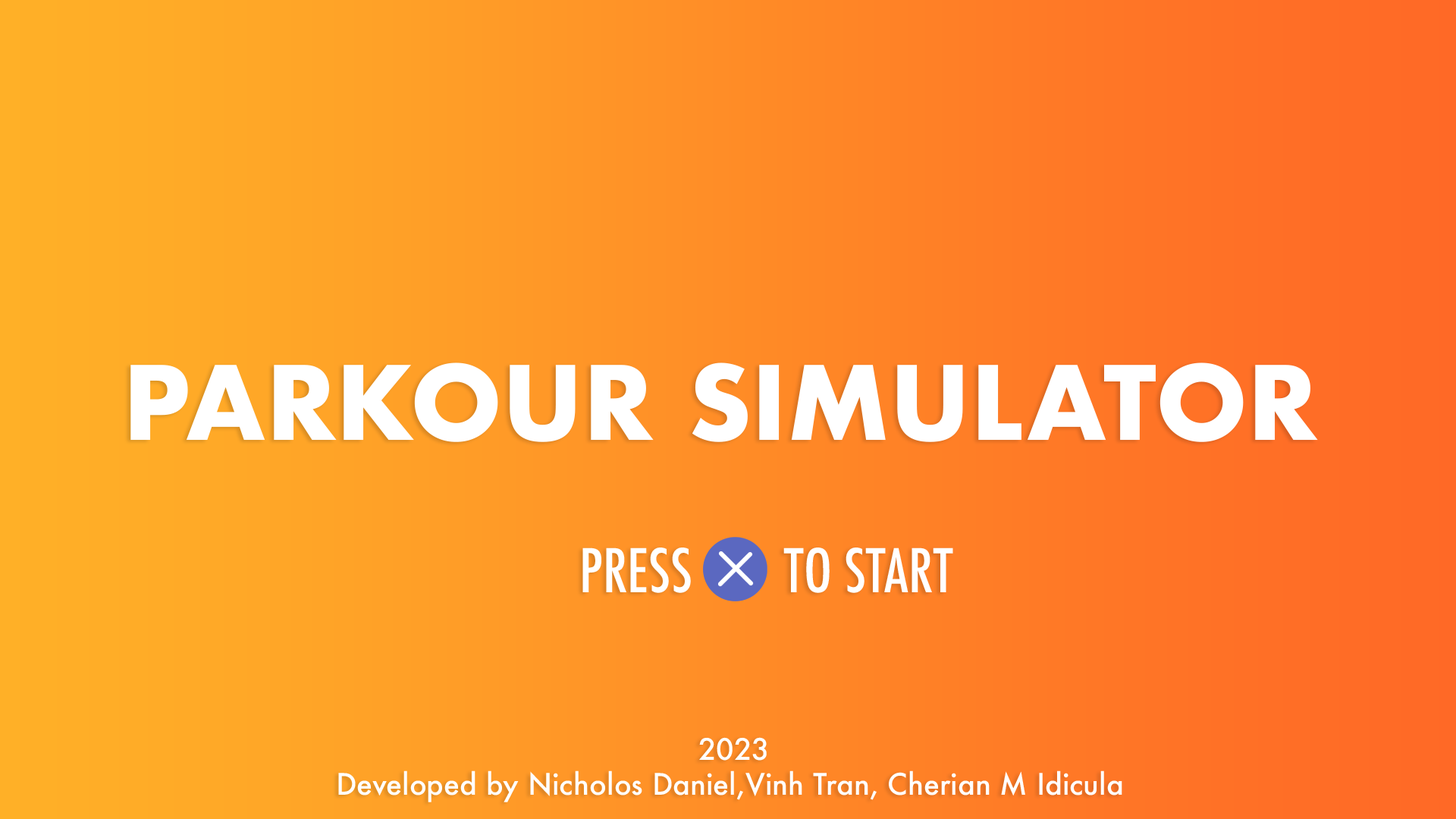
<style>
.page{position:relative;width:1456px;height:819px}
.page>*{position:absolute;margin:0}
.t1{font:99.4px "Futura-Bold";color:#ffffff}
.t2{font:58.5px "Futura-CondensedMedium";color:#ffffff}
.t3{font:28.9px "Futura-Medium";color:#ffffff}
</style>
<div class="page">
<p class="t1" style="left:130px;top:362px;width:1188px;height:80px">PARKOUR SIMULATOR</p>
<p class="t2" style="left:582px;top:548px;width:109px;height:45px">PRESS</p>
<p class="t2" style="left:783px;top:548px;width:170px;height:45px">TO START</p>
<p class="t3" style="left:338px;top:737px;width:784px;height:65px;text-align:center">2023<br>Developed by Nicholos Daniel,Vinh Tran, Cherian M Idicula</p>
</div>
